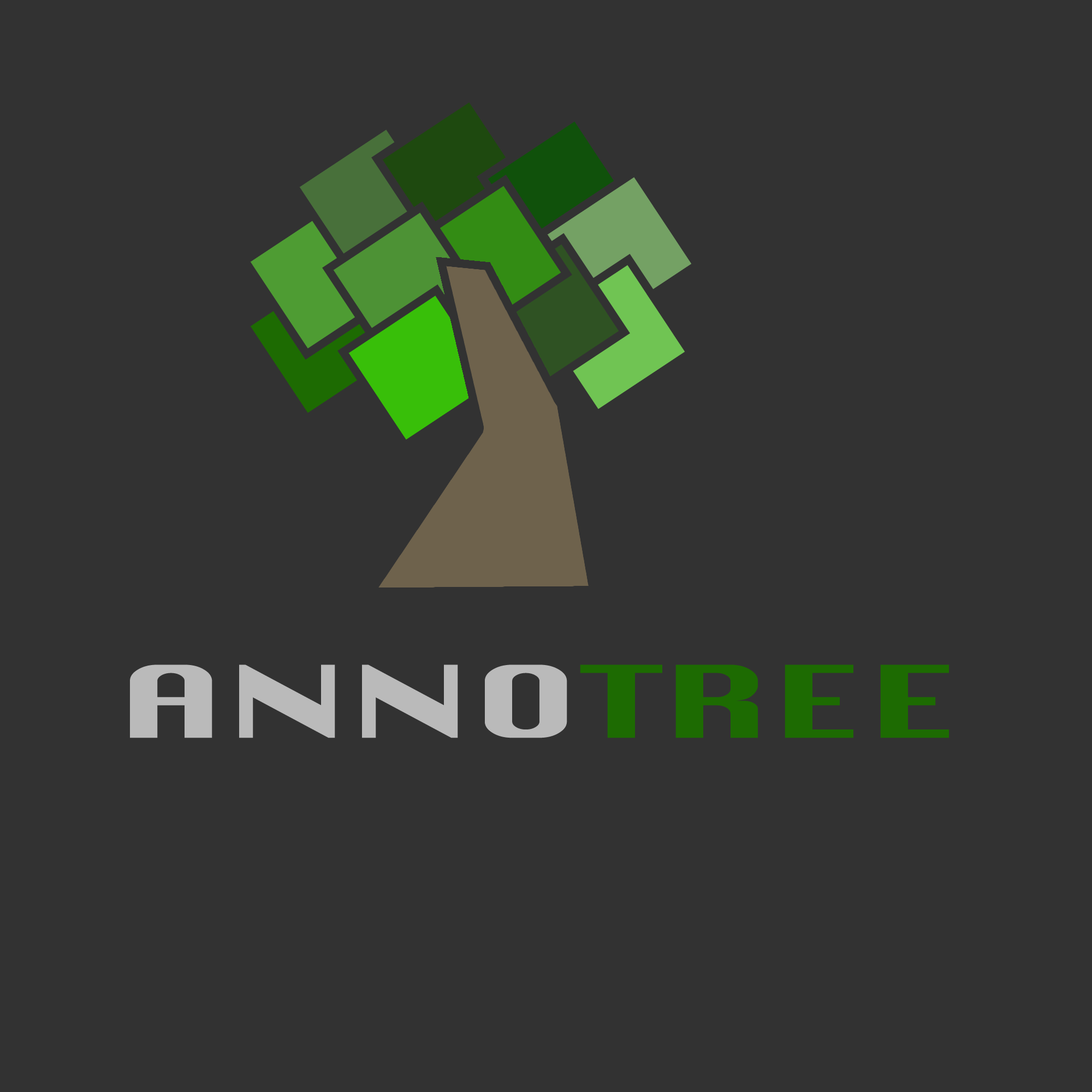
<style>
.page{position:relative;width:1092px;height:1092px;background:#323232}
.page>*{position:absolute;margin:0}
.t1{font:97.2px "Krungthep";color:#bababa;scale:1.68 1}
.t2{font:97.2px "Krungthep";color:#1d6b02;scale:1.68 1}
</style>
<div class="page">
<p class="t1" style="left:130px;top:664px;width:819px;height:74px">ANNO<span class="t2">TREE</span></p>
</div>
